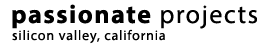
<style>
.page{position:relative;width:273px;height:45px;background:#ffffff}
.page>*{position:absolute;margin:0}
.t1{font:26px "MyriadPro-Bold";letter-spacing:0.06em;color:#000000}
.t2{font:26px "MyriadPro-Regular";letter-spacing:0.06em;color:#000000}
.t3{font:14px "MyriadPro-Regular";letter-spacing:0.06em;color:#000000}
</style>
<div class="page">
<p class="t1" style="left:12px;top:4px;width:245px;height:25px">passionate<span class="t2"> projects</span></p>
<p class="t3" style="left:12px;top:29px;width:153px;height:15px">silicon valley, california</p>
</div>
